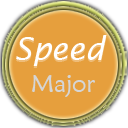
<style>
.page{position:relative;width:128px;height:128px;background:#e69f3d}
.page>*{position:absolute;margin:0}
.t1{font:32px "LucidaSans-Italic";color:#ffffff}
.t2{font:32px "LucidaSans-Italic"}
.t3{font:24px "MaiandraGD-Regular";color:#d5d5d5}
</style>
<div class="page">
<p class="t1" style="left:16px;top:35px;width:91px;height:31px">Speed</p>
<p class="t2" style="left:16px;top:37px;width:91px;height:31px">Speed</p>
<p class="t3" style="left:31px;top:75px;width:64px;height:22px">Major</p>
</div>
